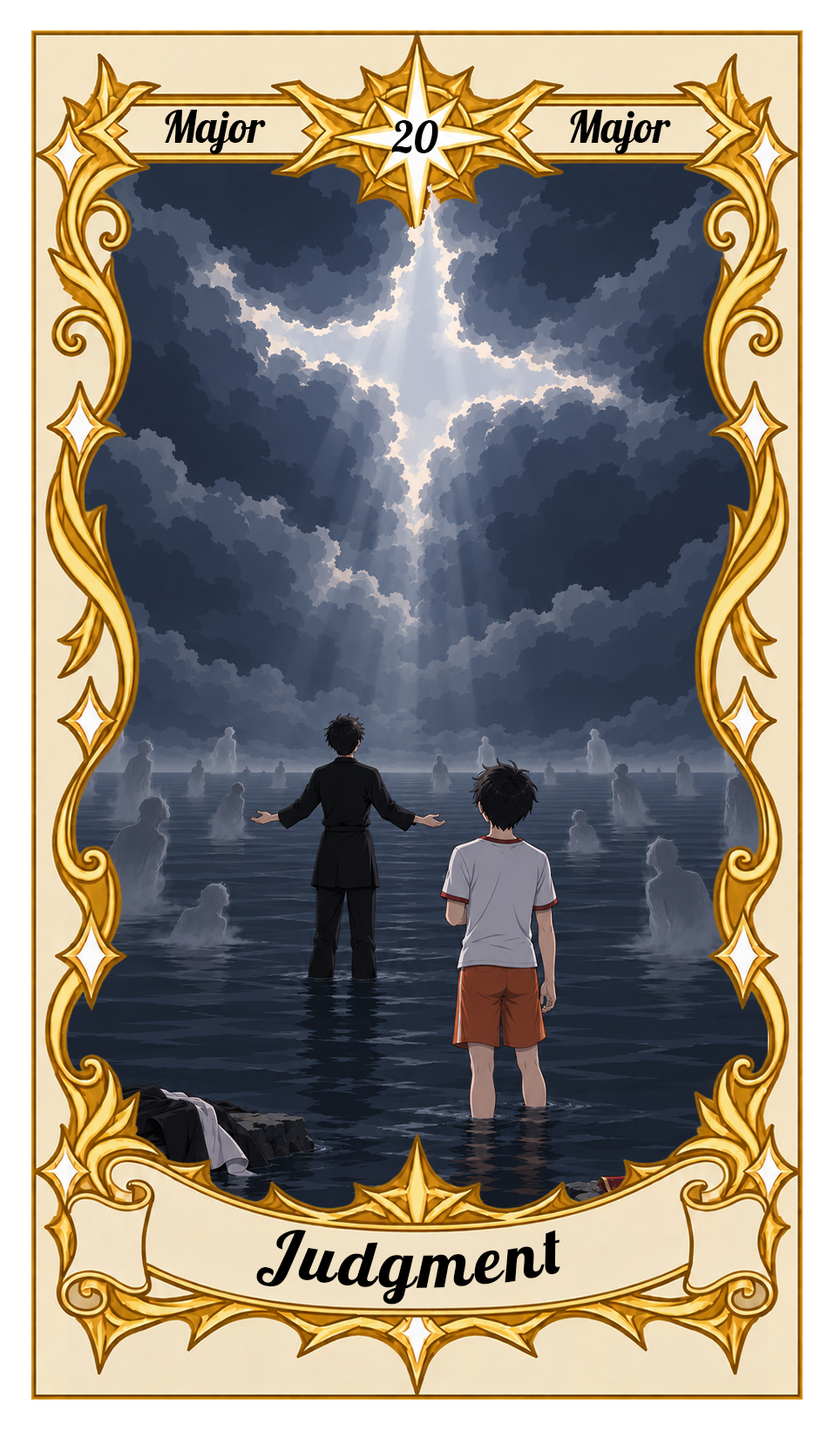
<style>
.page{position:relative;width:834px;height:1430px}
.page>*{position:absolute;margin:0}
.t1{font:43.6px "Lobster-Regular";color:#000000}
.t2{font:65.3px "Lobster-Regular";letter-spacing:0.05em;color:#000000}
</style>
<div class="page">
<p class="t1" style="left:165px;top:110px;width:101px;height:44px">Major</p>
<p class="t1" style="left:570px;top:110px;width:101px;height:44px">Major</p>
<p class="t1" style="left:391px;top:120px;width:47px;height:33px">20</p>
<p class="t2" style="left:256px;top:1230px;width:304px;height:75px">Judgment</p>
</div>
